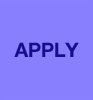
<style>
.page{position:relative;width:93px;height:100px;background:#887fff}
.page>*{position:absolute;margin:0}
.t1{font:20px "Helvetica75-Bold";letter-spacing:-0.02em;color:#170e8e;text-transform:uppercase}
</style>
<div class="page">
<p class="t1" style="left:14px;top:42px;width:65px;height:15px">Apply</p>
</div>
